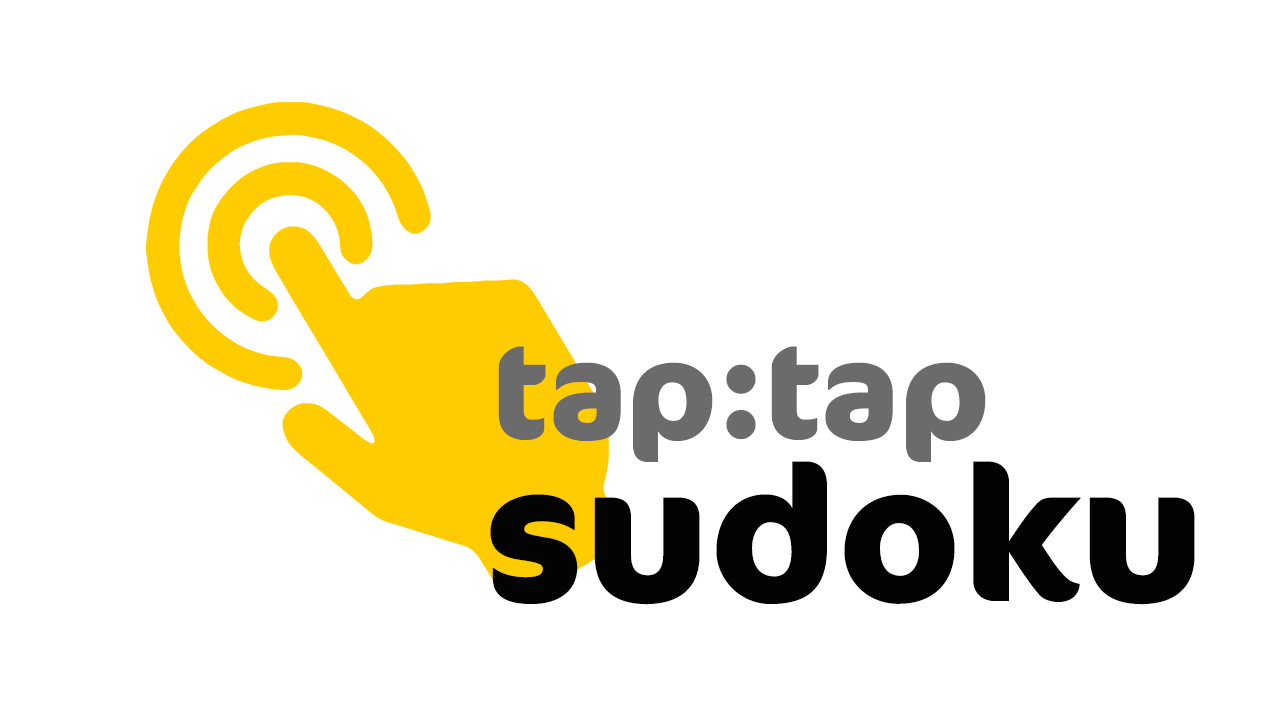
<style>
.page{position:relative;width:1280px;height:720px;background:#ffffff}
.page>*{position:absolute;margin:0}
.t1{font:135.2px "Cocon-Bold";color:#6b6b6b}
.t2{font:188.4px "Cocon-Bold";color:#030303}
</style>
<div class="page">
<p class="t1" style="left:498px;top:346px;width:488px;height:116px">tap:tap</p>
<p class="t2" style="left:490px;top:461px;width:705px;height:144px">sudoku</p>
</div>
